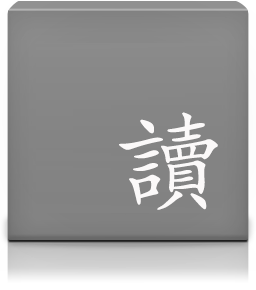
<style>
.page{position:relative;width:256px;height:290px}
.page>*{position:absolute;margin:0}
.t1{font:112px "STKaiti";color:#fbf9f9}
</style>
<div class="page">
<p class="t1" style="left:119px;top:112px;width:99px;height:98px">讀</p>
</div>
